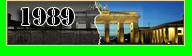
<style>
.page{position:relative;width:192px;height:56px;background:#00ff00}
.page>*{position:absolute;margin:0}
.t1{font:22.2px "StencilStd";color:#000000}
</style>
<div class="page">
<p class="t1" style="left:21px;top:8px;width:53px;height:17px">1989</p>
</div>
